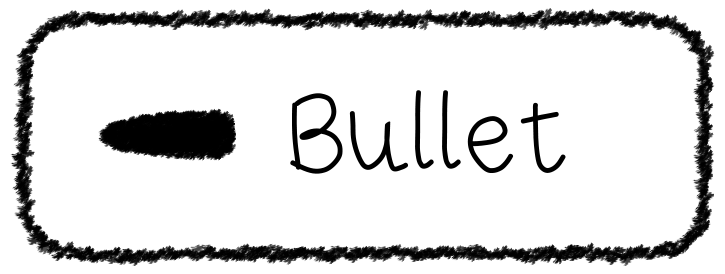
<style>
.page{position:relative;width:725px;height:274px;background:#ffffff}
.page>*{position:absolute;margin:0}
.t1{font:120px "RiseStarHand";color:#000000}
</style>
<div class="page">
<p class="t1" style="left:290px;top:90px;width:276px;height:84px">Bullet</p>
</div>
